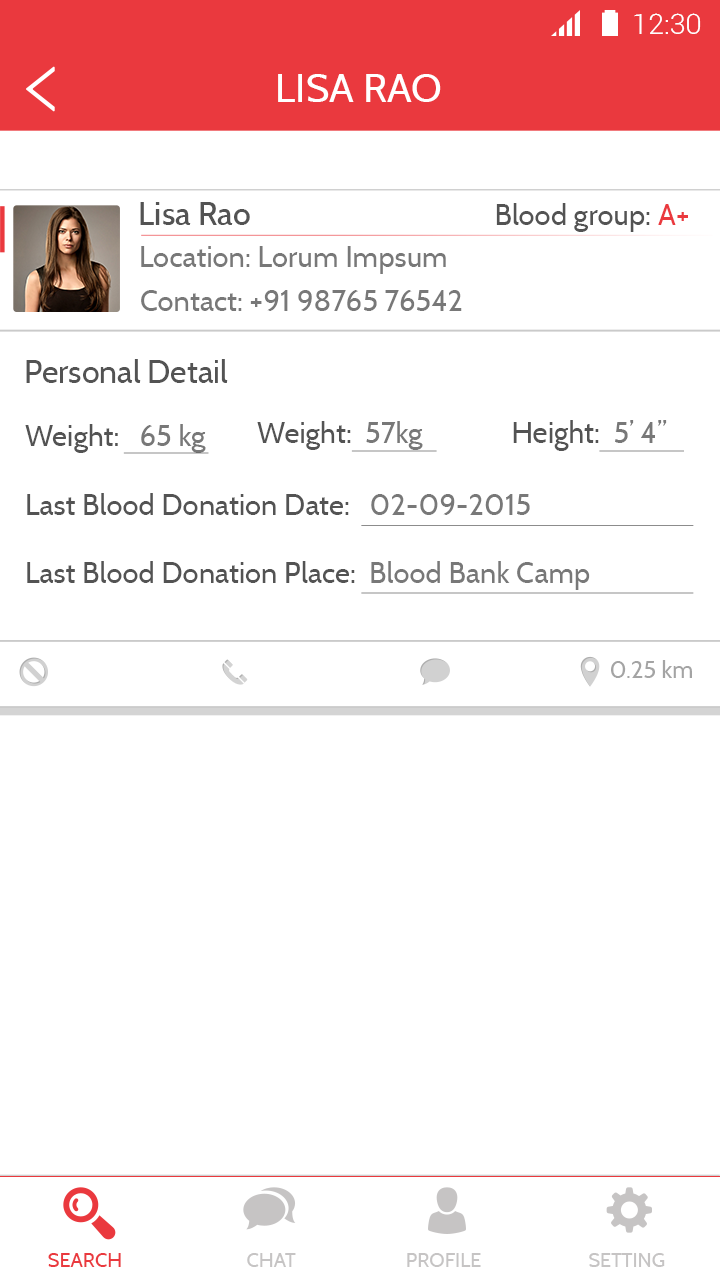
<style>
.page{position:relative;width:720px;height:1280px;background:#ffffff}
.page>*{position:absolute;margin:0}
.t1{font:28.4px "Roboto-Light";color:#ffffff}
.t2{font:40px "Cabin-Regular";color:#ffffff}
.t3{font:32.1px "Cabin-Medium";color:#535353}
.t4{font:29.3px "Cabin-Regular";color:#535353}
.t5{font:29.3px "Cabin-Regular";color:#ea393e}
.t6{font:29.4px "Cabin-Regular";color:#787878}
.t7{font:32px "Cabin-Regular";color:#535353}
.t8{font:29.4px/68.7px "Cabin-Regular";color:#535353}
.t9{font:29.4px/68.7px "Cabin-Regular";color:#787878}
.t10{font:29.3px "Cabin-Regular";color:#787878}
.t11{font:29.6px "Cabin-Regular";color:#535353}
.t12{font:29.6px "Cabin-Regular";color:#787878}
.t13{font:24.1px "Cabin-Regular";color:#a4a4a4}
.t14{font:20px "Cabin-Regular";color:#ea393e}
.t15{font:20px "Cabin-Regular";color:#c6c4c4}
</style>
<div class="page">
<p class="t1" style="left:634px;top:13px;width:67px;height:21px">12:30</p>
<p class="t2" style="left:278px;top:74px;width:163px;height:28px">LISA RAO</p>
<p class="t3" style="left:140px;top:202px;width:110px;height:23px">Lisa Rao</p>
<p class="t4" style="left:496px;top:203px;width:192px;height:29px">Blood group: <span class="t5">A+</span></p>
<p class="t6" style="left:141px;top:246px;width:305px;height:28px">Location: Lorum Impsum</p>
<p class="t6" style="left:141px;top:290px;width:321px;height:21px">Contact: +91 98765 76542</p>
<p class="t7" style="left:26px;top:359px;width:202px;height:24px">Personal Detail</p>
<p class="t8" style="left:25px;top:424px;width:565px;height:166px">Weight:   <span class="t9">65 kg<br></span>Last Blood Donation Date:   <span class="t9">02-09-2015<br></span>Last Blood Donation Place:  <span class="t9">Blood Bank Camp</span></p>
<p class="t4" style="left:257px;top:421px;width:166px;height:29px">Weight:  <span class="t10">57kg</span></p>
<p class="t11" style="left:513px;top:420px;width:154px;height:31px">Height:  <span class="t12">5’ 4’’</span></p>
<p class="t13" style="left:611px;top:660px;width:81px;height:18px">0.25 km</p>
<p class="t14" style="left:48px;top:1253px;width:73px;height:14px">SEARCH</p>
<p class="t15" style="left:247px;top:1253px;width:49px;height:14px">CHAT</p>
<p class="t15" style="left:407px;top:1253px;width:74px;height:14px">PROFILE</p>
<p class="t15" style="left:589px;top:1253px;width:76px;height:14px">SETTING</p>
</div>
